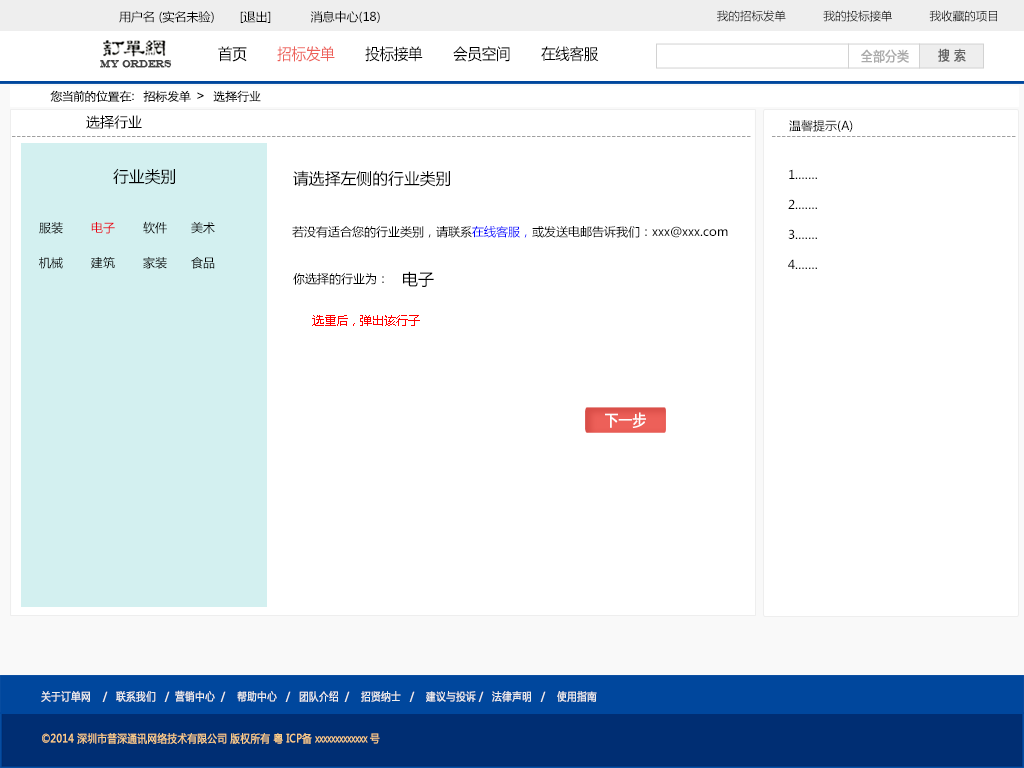
<style>
.page{position:relative;width:1024px;height:768px;background:#ffffff}
.page>*{position:absolute;margin:0}
.t1{font:12px "MicrosoftYaHei";color:#000000}
.t2{font:11.5px "MicrosoftYaHei";color:#000000}
.t3{font:15.4px "MicrosoftYaHei";color:#000000;font-variant:small-caps;scale:0.94 1}
.t4{font:15.4px "MicrosoftYaHei";color:#ed6059;font-variant:small-caps;scale:0.94 1}
.t5{font:13.2px "MicrosoftYaHei";color:#aaaaaa;font-variant:small-caps;font-weight:bold;scale:0.86 1}
.t6{font:13.2px "MicrosoftYaHei";color:#626262;font-variant:small-caps;font-weight:bold;scale:0.86 1}
.t7{font:9.9px "EngraversMT";color:#434343;font-variant:small-caps;font-weight:bold;scale:0.86 1}
.t8{font:12px "STXihei";color:#060606;scale:1.04 1}
.t9{font:14px "MicrosoftYaHei";color:#000000}
.t10{font:12px "MicrosoftYaHei";color:#a0a0a0}
.t11{font:15.8px "MicrosoftYaHei";color:#010101}
.t12{font:12px/30px "MicrosoftYaHei";color:#000000}
.t13{font:12px "MicrosoftYaHei";color:#e60012}
.t14{font:12px "MicrosoftYaHei";color:#0000ff}
.t15{font:16px "MicrosoftYaHei";color:#000000}
.t16{font:12px "MicrosoftYaHei";color:#ff0000}
.t17{font:15.4px "MicrosoftYaHei";color:#ffffff;font-variant:small-caps;font-weight:bold;scale:0.86 1}
.t18{font:11px "MicrosoftYaHei";color:#eeeeee;font-variant:small-caps;font-weight:bold;scale:0.86 1}
.t19{font:15.4px "STXihei";color:#eeeeee;font-variant:small-caps;font-weight:bold;scale:0.86 1}
.t20{font:11px "MicrosoftYaHei";color:#facd89;font-variant:small-caps;font-weight:bold;scale:0.87 1}
.t21{font:11px "MicrosoftYaHei";color:#eeeeee;font-variant:small-caps;font-weight:bold;scale:0.87 1}
</style>
<div class="page">
<p class="t1" style="left:119px;top:11px;width:261px;height:12px">用户名 (实名未验)       [退出]           消息中心(18)</p>
<p class="t2" style="left:717px;top:10px;width:280px;height:12px">我的招标发单           我的投标接单           我收藏的项目</p>
<p class="t3" style="left:218px;top:46px;width:381px;height:16px">首页       <span class="t4">招标发单</span>       投标接单       会员空间       在线客服</p>
<p class="t5" style="left:861px;top:49px;width:48px;height:14px">全部分类</p>
<p class="t6" style="left:938px;top:48px;width:28px;height:14px">搜 索</p>
<p class="t7" style="left:100px;top:60px;width:72px;height:8px">MY ORDERS</p>
<p class="t8" style="left:50px;top:90px;width:211px;height:12px">您当前的位置在：  招标发单  &gt;   选择行业</p>
<p class="t9" style="left:86px;top:115px;width:56px;height:14px">选择行业</p>
<p class="t1" style="left:789px;top:120px;width:64px;height:12px">温馨提示(A)</p>
<p class="t10" style="left:12px;top:136px;width:739px;height:1px">----------------------------------------------------------------------------------------------------------------------------------------------------</p>
<p class="t10" style="left:772px;top:136px;width:244px;height:1px">-------------------------------------------------</p>
<p class="t11" style="left:113px;top:168px;width:62px;height:17px">行业类别</p>
<p class="t11" style="left:293px;top:170px;width:157px;height:17px">请选择左侧的行业类别</p>
<p class="t12" style="left:788px;top:169px;width:29px;height:100px">1.……<br>2.……<br>3.……<br>4.……</p>
<p class="t1" style="left:39px;top:221px;width:176px;height:13px">服装       <span class="t13">电子</span>       软件      美术</p>
<p class="t1" style="left:292px;top:225px;width:436px;height:13px">若没有适合您的行业类别，请联系<span class="t14">在线客服，</span>或发送电邮告诉我们：xxx@xxx.com</p>
<p class="t1" style="left:39px;top:256px;width:176px;height:13px">机械       建筑       家装      食品</p>
<p class="t1" style="left:293px;top:272px;width:91px;height:13px">你选择的行业为：</p>
<p class="t15" style="left:403px;top:271px;width:31px;height:16px">电子</p>
<p class="t16" style="left:312px;top:315px;width:108px;height:11px">选重后，弹出该行子</p>
<p class="t17" style="left:605px;top:412px;width:41px;height:16px">下一步</p>
<p class="t18" style="left:41px;top:690px;width:556px;height:12px"><span class="t19"><br><br></span>关于订单网    /   联系我们   /  营销中心  /    帮助中心   /   团队介绍  /    招贤纳士   /    建议与投诉 /   法律声明   /    使用指南</p>
<p class="t20" style="left:42px;top:733px;width:338px;height:11px"><span class="t21"> </span>©2014 深圳市普深通讯网络技术有限公司 版权所有 粤 ICP备 xxxxxxxxxxxxx 号</p>
</div>
